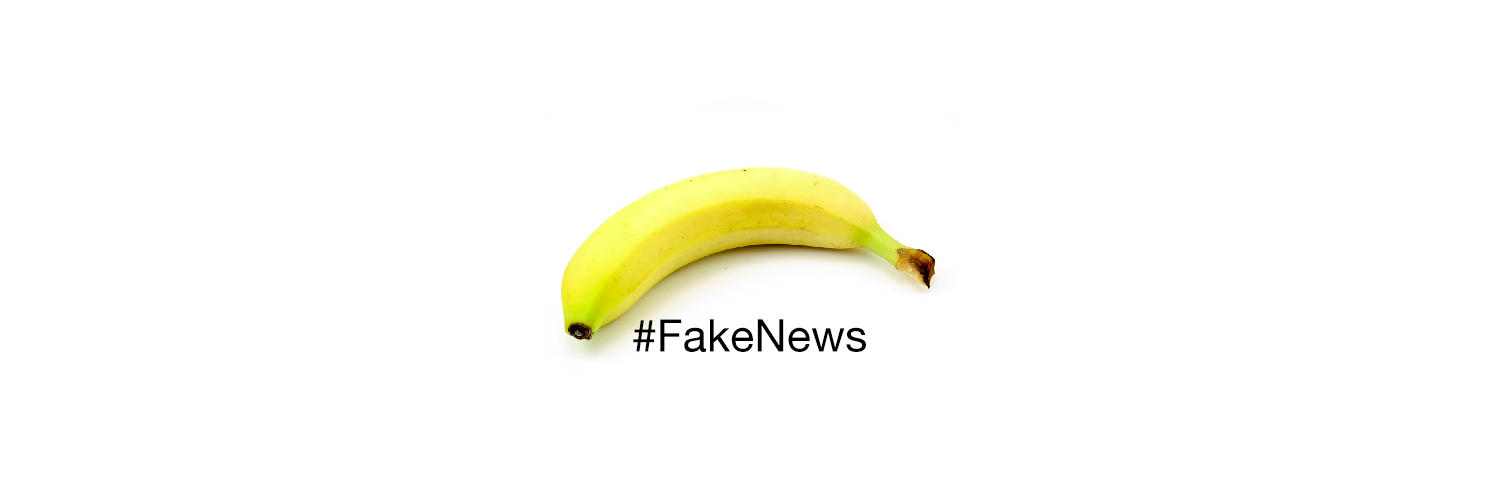
<style>
.page{position:relative;width:1500px;height:500px;background:#ffffff}
.page>*{position:absolute;margin:0}
.t1{font:45px "HelveticaNeue";color:#000000}
</style>
<div class="page">
<p class="t1" style="left:633px;top:319px;width:233px;height:33px">#FakeNews</p>
</div>
